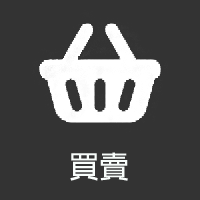
<style>
.page{position:relative;width:200px;height:200px;background:#333333}
.page>*{position:absolute;margin:0}
.t1{font:30px "AdobeFanHeitiStd-Bold";color:#f8fdfb}
</style>
<div class="page">
<p class="t1" style="left:70px;top:152px;width:58px;height:29px">買賣</p>
</div>
